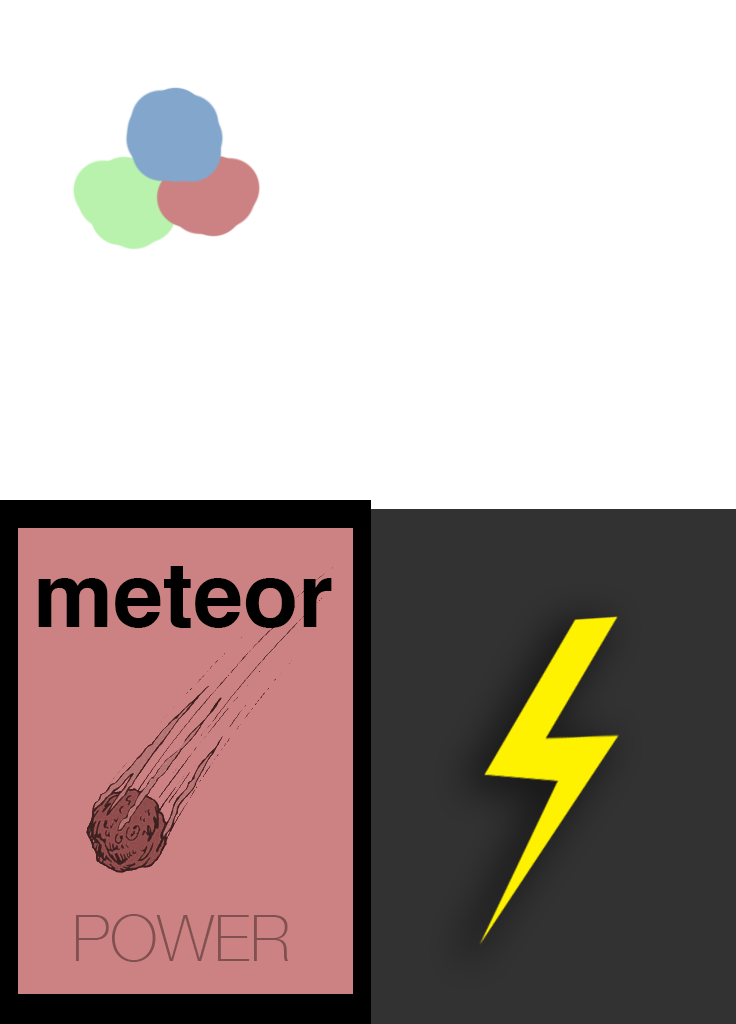
<style>
.page{position:relative;width:736px;height:1024px;background:#ffffff}
.page>*{position:absolute;margin:0}
.t1{font:90px "Helvetica-Bold";color:#000000}
.t2{font:64px "HelveticaNeue-Thin";color:#815050}
</style>
<div class="page">
<p class="t1" style="left:38px;top:566px;width:294px;height:62px">meteor</p>
<p class="t2" style="left:76px;top:914px;width:213px;height:48px">POWER</p>
</div>
